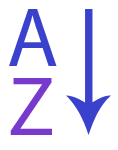
<style>
.page{position:relative;width:118px;height:150px;background:#ffffff}
.page>*{position:absolute;margin:0}
.t1{font:84px "MyriadPro-Regular";color:#3a41cc}
.t2{font:84px "MyriadPro-Regular";color:#783acc}
</style>
<div class="page">
<p class="t1" style="left:9px;top:9px;width:48px;height:57px">A</p>
<p class="t2" style="left:10px;top:78px;width:42px;height:57px">Z</p>
</div>
